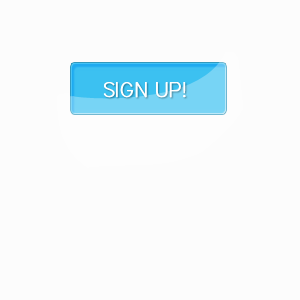
<style>
.page{position:relative;width:300px;height:300px;background:#fcfcfc}
.page>*{position:absolute;margin:0}
.t1{font:21.3px "District-Thin";color:#ffffff;font-weight:bold}
</style>
<div class="page">
<p class="t1" style="left:103px;top:82px;width:83px;height:16px">SIGN UP!</p>
</div>
